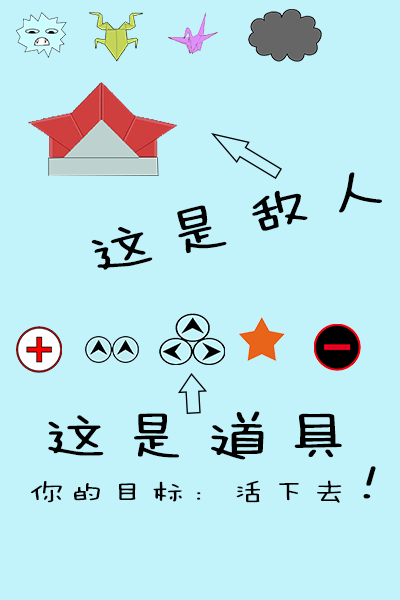
<style>
.page{position:relative;width:400px;height:600px;background:#c2f3fb}
.page>*{position:absolute;margin:0}
.t1{font:50.9px "FZMWJW--GB1-0";letter-spacing:0.1em;color:#000000;scale:1.44 1}
.t2{font:25.4px "FZMWJW--GB1-0";letter-spacing:0.1em;color:#000000;scale:1.44 1}
</style>
<div class="page">
<p class="t1" style="left:91px;top:172px;width:291px;height:98px;rotate:-14deg">这是敌人</p>
<p class="t1" style="left:48px;top:411px;width:294px;height:49px">这是道具</p>
<p class="t2" style="left:30px;top:466px;width:346px;height:37px">你的目标：活下去<span class="t1">！</span></p>
</div>
